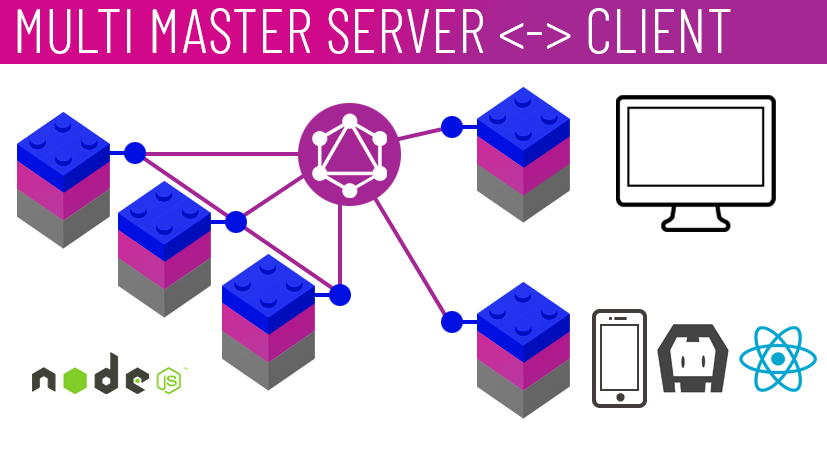
<style>
.page{position:relative;width:827px;height:450px;background:#ffffff}
.page>*{position:absolute;margin:0}
.t1{font:62.5px "BarlowCondensed-Light";color:#ffffff}
</style>
<div class="page">
<p class="t1" style="left:17px;top:8px;width:714px;height:46px">MULTI MASTER SERVER &lt;-&gt; CLIENT</p>
</div>
